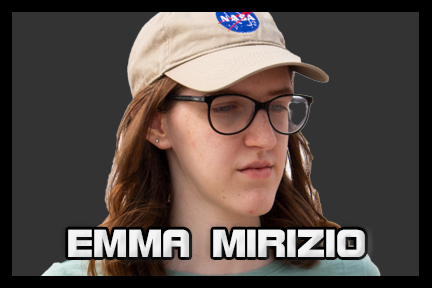
<style>
.page{position:relative;width:432px;height:288px;background:#333333}
.page>*{position:absolute;margin:0}
.t1{font:41.7px "BolsterBold";color:#f3f3f3}
</style>
<div class="page">
<p class="t1" style="left:68px;top:229px;width:297px;height:28px">EMMA MIRIZIO</p>
</div>
